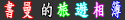
<style>
.page{position:relative;width:125px;height:20px;background:#333333}
.page>*{position:absolute;margin:0}
.t1{font:18px "DFKaiShu-SB-Estd-BF";letter-spacing:0.04em;color:#fffefe;scale:0.69 1}
.t2{font:18px "DFKaiShu-SB-Estd-BF";letter-spacing:0.04em;color:#ffffff;scale:0.69 1}
</style>
<div class="page">
<p class="t1" style="left:4px;top:1px;width:11px;height:17px">書</p>
<p class="t2" style="left:22px;top:2px;width:11px;height:16px">曼</p>
<p class="t2" style="left:41px;top:2px;width:11px;height:15px">的</p>
<p class="t2" style="left:57px;top:2px;width:13px;height:15px">旅</p>
<p class="t2" style="left:75px;top:2px;width:13px;height:15px">遊</p>
<p class="t2" style="left:93px;top:2px;width:11px;height:16px">相</p>
<p class="t2" style="left:111px;top:1px;width:10px;height:17px">簿</p>
</div>
